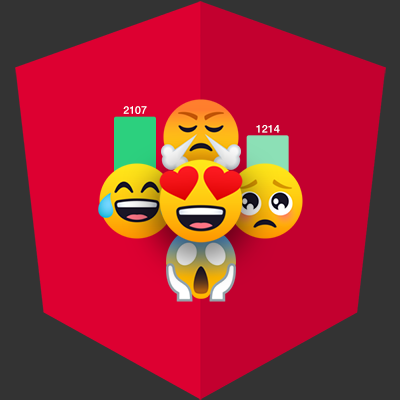
<style>
.page{position:relative;width:400px;height:400px;background:#333333}
.page>*{position:absolute;margin:0}
.t1{font:10.7px "HelveticaNeueLTPro-Md";letter-spacing:0.005em;color:#ffffff}
</style>
<div class="page">
<p class="t1" style="left:123px;top:106px;width:24px;height:8px">2107</p>
<p class="t1" style="left:256px;top:125px;width:24px;height:8px">1214</p>
</div>
